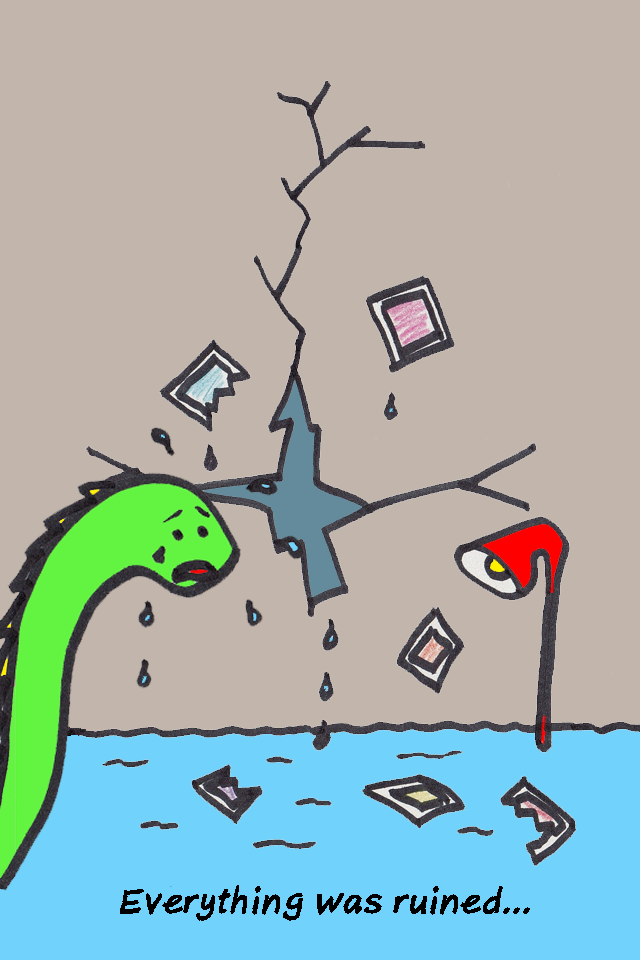
<style>
.page{position:relative;width:640px;height:960px;background:#c1b5ac}
.page>*{position:absolute;margin:0}
.t1{font:36px "AxureHandwriting-BoldItalic";color:#000000}
</style>
<div class="page">
<p class="t1" style="left:120px;top:885px;width:410px;height:36px">Everything was ruined...</p>
</div>
